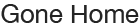
<style>
.page{position:relative;width:140px;height:28px;background:#ffffff}
.page>*{position:absolute;margin:0}
.t1{font:25.8px "HelveticaNeue";color:#242424}
</style>
<div class="page">
<p class="t1" style="left:1px;top:4px;width:138px;height:19px">Gone Home</p>
</div>
